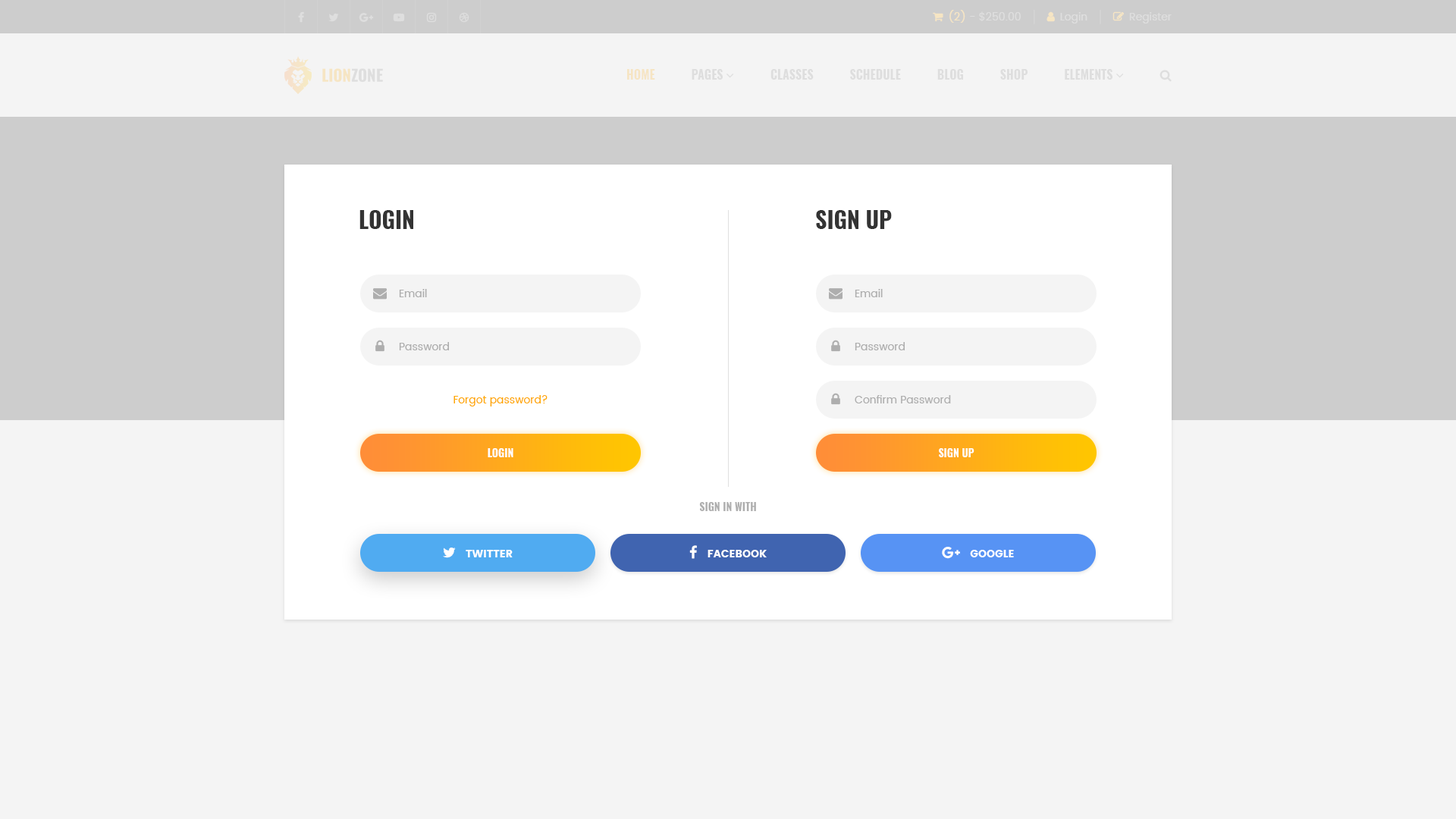
<style>
.page{position:relative;width:1456px;height:819px;background:#f4f4f4}
.page>*{position:absolute;margin:0}
.t1{font:22.7px "Oswald-Bold";color:#333333;text-transform:uppercase}
.t2{font:10.6px "Poppins-Regular";color:#aeaeae}
.t3{font:10.6px "Poppins-Regular";color:#ffa901}
.t4{font:10.6px "Oswald-Bold";color:#ffffff;text-transform:uppercase}
.t5{font:10.6px "Oswald-Bold";color:#aeaeae;text-transform:uppercase}
</style>
<div class="page">
<p class="t1" style="left:359px;top:210px;width:54px;height:19px">login</p>
<p class="t1" style="left:816px;top:210px;width:76px;height:19px">sign up</p>
<p class="t2" style="left:399px;top:289px;width:28px;height:8px">Email</p>
<p class="t2" style="left:855px;top:289px;width:28px;height:8px">Email</p>
<p class="t2" style="left:399px;top:342px;width:50px;height:8px">Password</p>
<p class="t2" style="left:855px;top:342px;width:50px;height:8px">Password</p>
<p class="t3" style="left:453px;top:395px;width:95px;height:11px">Forgot password?</p>
<p class="t2" style="left:855px;top:395px;width:96px;height:8px">Confirm Password</p>
<p class="t4" style="left:488px;top:448px;width:25px;height:9px">login</p>
<p class="t4" style="left:939px;top:448px;width:35px;height:9px">sign up</p>
<p class="t5" style="left:699px;top:502px;width:57px;height:9px">sign in with</p>
</div>
